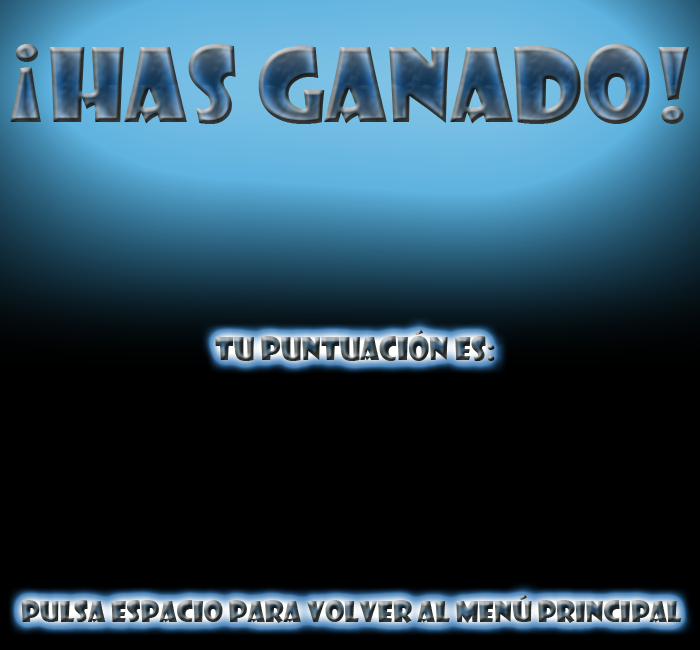
<style>
.page{position:relative;width:700px;height:650px;background:#000000}
.page>*{position:absolute;margin:0}
.t1{font:100px "ShowcardGothic-Reg"}
.t2{font:30px "ShowcardGothic-Reg"}
.t3{font:28px "ShowcardGothic-Reg"}
</style>
<div class="page">
<p class="t1" style="left:10px;top:44px;width:679px;height:80px">¡HAS GANADO!</p>
<p class="t2" style="left:215px;top:329px;width:280px;height:32px">Tu puntuación es:</p>
<p class="t3" style="left:21px;top:594px;width:661px;height:29px">PULSA ESPACIO PARA VOLVER AL MENÚ PRINCIPAL</p>
</div>
